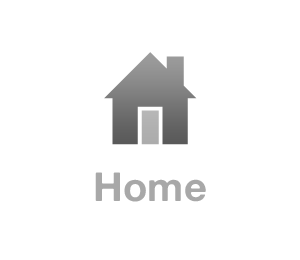
<style>
.page{position:relative;width:300px;height:260px;background:#ffffff}
.page>*{position:absolute;margin:0}
.t1{font:40px "AlteHaasGrotesk_Bold";color:#a8a8a8}
</style>
<div class="page">
<p class="t1" style="left:95px;top:172px;width:111px;height:30px">Home</p>
</div>
